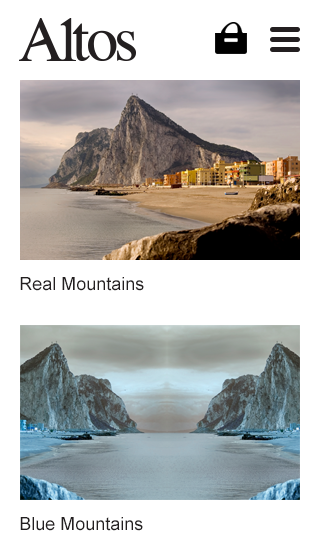
<style>
.page{position:relative;width:320px;height:560px;background:#ffffff}
.page>*{position:absolute;margin:0}
.t1{font:18px "ArialMT";color:#231f20}
</style>
<div class="page">
<p class="t1" style="left:20px;top:277px;width:124px;height:14px">Real Mountains</p>
<p class="t1" style="left:20px;top:517px;width:123px;height:14px">Blue Mountains</p>
</div>
